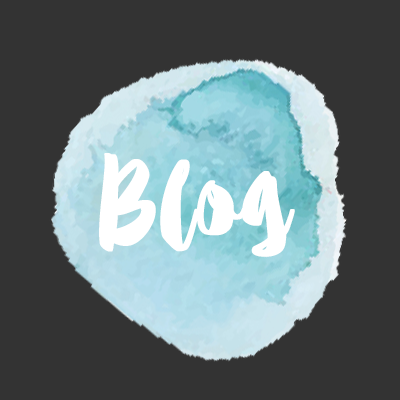
<style>
.page{position:relative;width:400px;height:400px;background:#333333}
.page>*{position:absolute;margin:0}
.t1{font:100px "Stonestickfreetester";color:#ffffff;font-weight:bold}
</style>
<div class="page">
<p class="t1" style="left:99px;top:153px;width:196px;height:104px">Blog</p>
</div>
